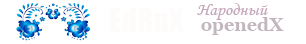
<style>
.page{position:relative;width:306px;height:44px;background:#ffffff}
.page>*{position:absolute;margin:0}
.t1{font:18px "MonotypeCorsiva";color:#c6a9bc}
.t2{font:18px "Georgia-Bold";color:#c2b7be}
</style>
<div class="page">
<p class="t1" style="left:197px;top:3px;width:71px;height:17px">Народный</p>
<p class="t2" style="left:201px;top:17px;width:83px;height:18px">openedX</p>
</div>
